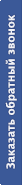
<style>
.page{position:relative;width:22px;height:185px;background:#3b5998}
.page>*{position:absolute;margin:0}
.t1{font:11px "LucidaGrande-Bold";color:#ffffff}
</style>
<div class="page">
<p class="t1" style="left:5px;top:14px;width:12px;height:155px;rotate:-90deg;opacity:0.9">Заказать обратный звонок</p>
</div>
